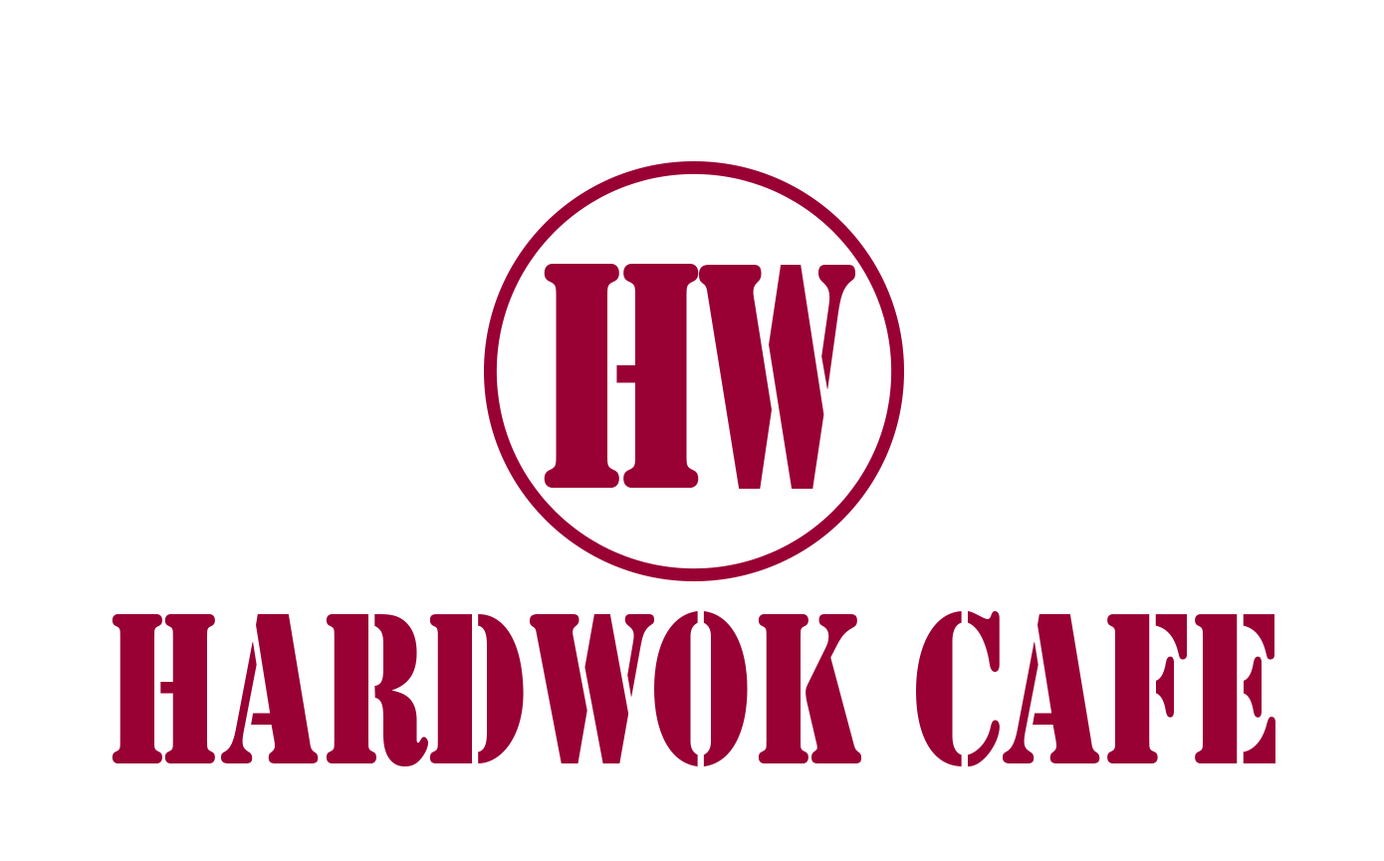
<style>
.page{position:relative;width:1384px;height:861px;background:#ffffff}
.page>*{position:absolute;margin:0}
.t1{font:299.2px "StencilStd";color:#990033;scale:0.7 1}
.t2{font:299.2px "StencilStd";color:#990033;scale:0.59 1}
.t3{font:199.2px "StencilStd";color:#990033;scale:0.7 1}
</style>
<div class="page">
<p class="t1" style="left:544px;top:264px;width:155px;height:224px">H</p>
<p class="t2" style="left:699px;top:264px;width:156px;height:225px">W</p>
<p class="t3" style="left:112px;top:611px;width:1164px;height:156px">HardWok Cafe</p>
</div>
